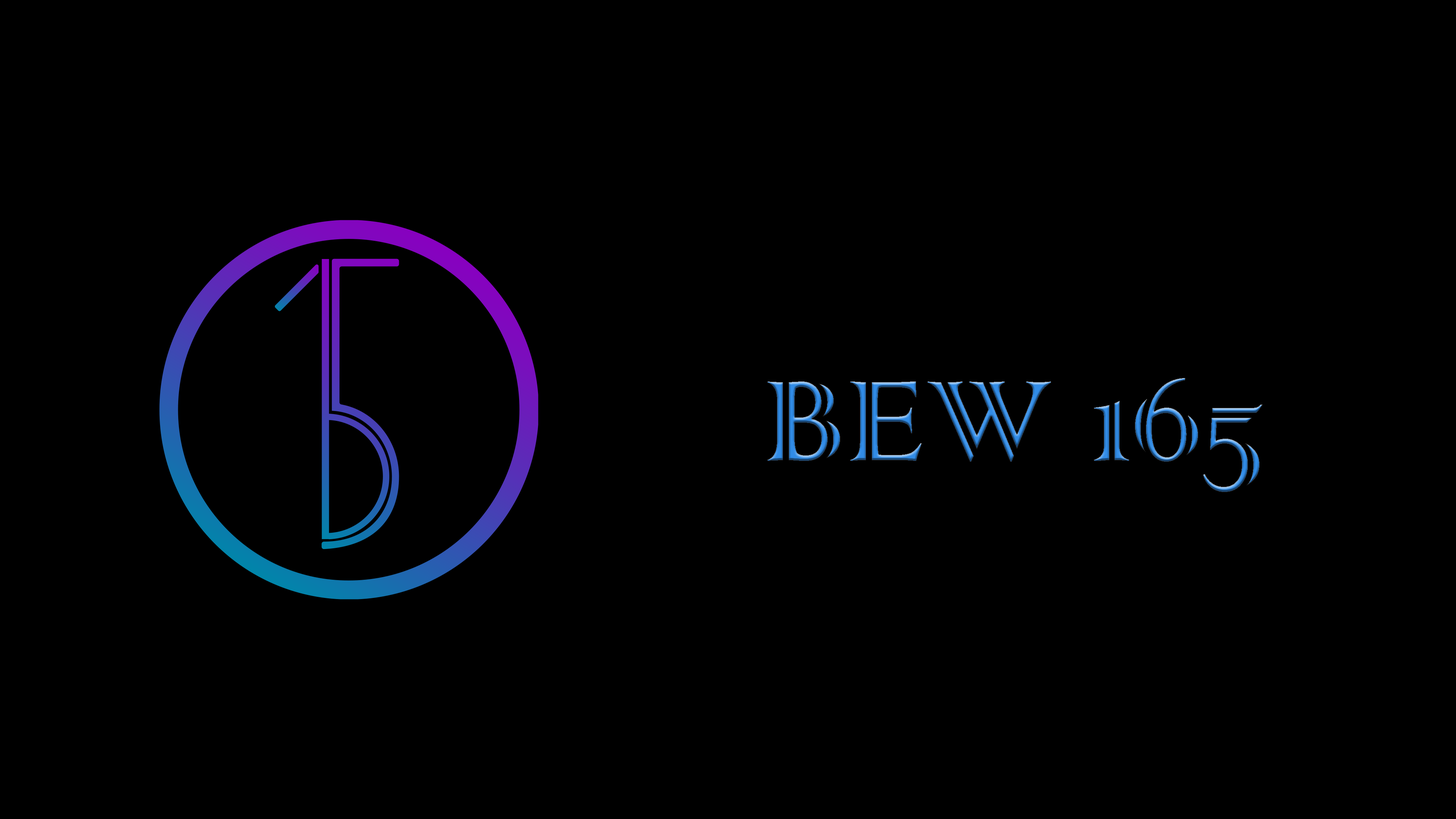
<style>
.page{position:relative;width:1456px;height:819px;background:#000000}
.page>*{position:absolute;margin:0}
.t1{font:151.7px "ColonnaMT"}
</style>
<div class="page">
<p class="t1" style="left:767px;top:378px;width:496px;height:114px">BEW 165</p>
</div>
